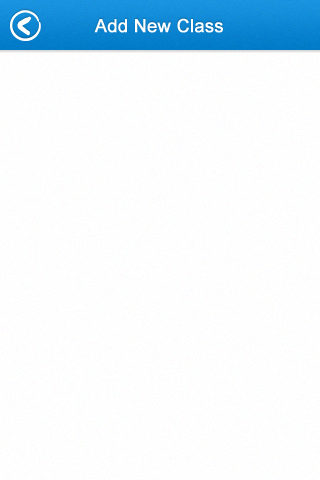
<style>
.page{position:relative;width:320px;height:480px}
.page>*{position:absolute;margin:0}
.t1{font:18px "ArialMT";letter-spacing:0.025em;color:#ffffff;font-weight:bold}
</style>
<div class="page">
<p class="t1" style="left:94px;top:18px;width:129px;height:15px">Add New Class</p>
</div>
